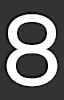
<style>
.page{position:relative;width:64px;height:100px;background:#333333}
.page>*{position:absolute;margin:0}
.t1{font:100px "Amiko-Regular";color:#ffffff}
</style>
<div class="page">
<p class="t1" style="left:6px;top:14px;width:52px;height:73px">8</p>
</div>
